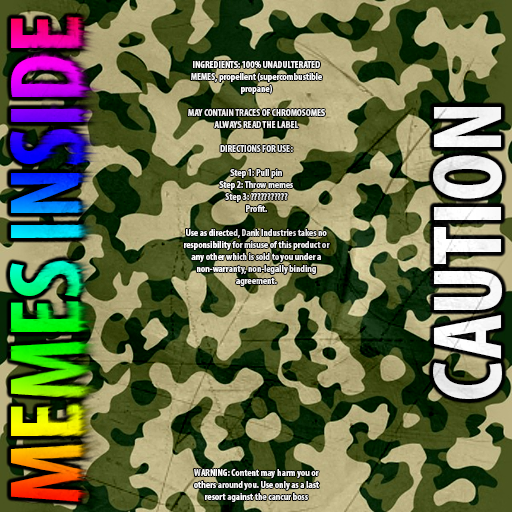
<style>
.page{position:relative;width:512px;height:512px}
.page>*{position:absolute;margin:0}
.t1{font:10px "MyriadPro-BoldCond";color:#f6f6f6}
</style>
<div class="page">
<p class="t1" style="left:184px;top:61px;width:146px;height:441px;text-align:center">INGREDIENTS: 100% UNADULTERATED MEMES, propellent (supercombustible propane)<br><br>MAY CONTAIN TRACES OF CHROMOSOMES<br>ALWAYS READ THE LABEL<br><br>DIRECTIONS FOR USE:<br><br>Step 1: Pull pin<br>Step 2: Throw memes<br>Step 3: ???????????<br>Profit.<br><br>Use as directed, Dank Industries takes no responsibility for misuse of this product or any other which is sold to you under a non-warranty, non-legally binding agreement.<br><br><br><br><br><br><br><br><br><br><br><br><br><br><br><br>WARNING: Content may harm you or others around you. Use only as a last resort against the cancur boss</p>
</div>
